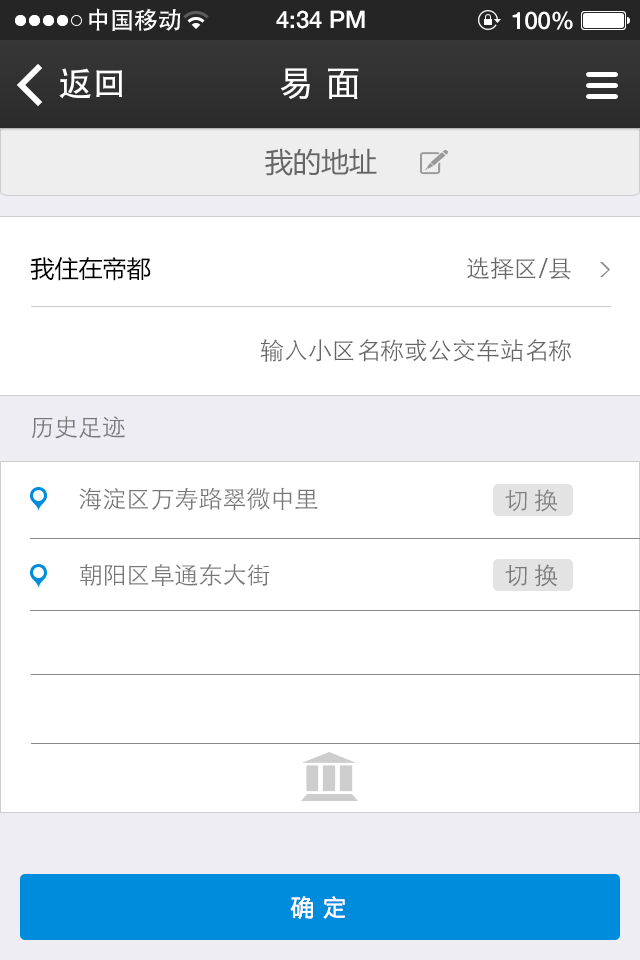
<style>
.page{position:relative;width:640px;height:960px;background:#ffffff}
.page>*{position:absolute;margin:0}
.t1{font:24px "AdobeHeitiStd-Regular";color:#ffffff}
.t2{font:24px "HelveticaNeue-Medium";color:#ffffff}
.t3{font:34px "AdobeHeitiStd-Regular";color:#ffffff}
.t4{font:34px "HiraginoSansGB-W3";color:#ffffff;font-weight:bold}
.t5{font:28px "MicrosoftYaHei";color:#666666}
.t6{font:24px "MicrosoftYaHei";color:#000000}
.t7{font:24px "STHeitiSC-Light";color:#666666}
.t8{font:24px "STHeitiSC-Light";color:#777777}
.t9{font:24px "STHeitiSC-Light";color:#7f7f7f}
.t10{font:24px "HiraginoSansGB-W3";color:#ffffff}
</style>
<div class="page">
<p class="t1" style="left:89px;top:8px;width:92px;height:23px">中国移动</p>
<p class="t2" style="left:276px;top:10px;width:89px;height:19px">4:34 PM</p>
<p class="t2" style="left:512px;top:11px;width:61px;height:19px">100%</p>
<p class="t3" style="left:59px;top:68px;width:63px;height:31px">返回</p>
<p class="t4" style="left:281px;top:68px;width:78px;height:31px">易 面</p>
<p class="t5" style="left:265px;top:148px;width:112px;height:28px">我的地址</p>
<p class="t6" style="left:30px;top:257px;width:121px;height:24px">我住在帝都</p>
<p class="t7" style="left:467px;top:257px;width:104px;height:23px">选择区/县</p>
<p class="t7" style="left:260px;top:339px;width:312px;height:23px">输入小区名称或公交车站名称</p>
<p class="t8" style="left:31px;top:416px;width:94px;height:23px">历史足迹</p>
<p class="t8" style="left:79px;top:487px;width:239px;height:23px">海淀区万寿路翠微中里</p>
<p class="t9" style="left:505px;top:489px;width:52px;height:23px">切 换</p>
<p class="t8" style="left:80px;top:564px;width:190px;height:22px">朝阳区阜通东大街</p>
<p class="t8" style="left:505px;top:564px;width:52px;height:23px">切 换</p>
<p class="t10" style="left:290px;top:896px;width:55px;height:23px">确 定</p>
</div>
